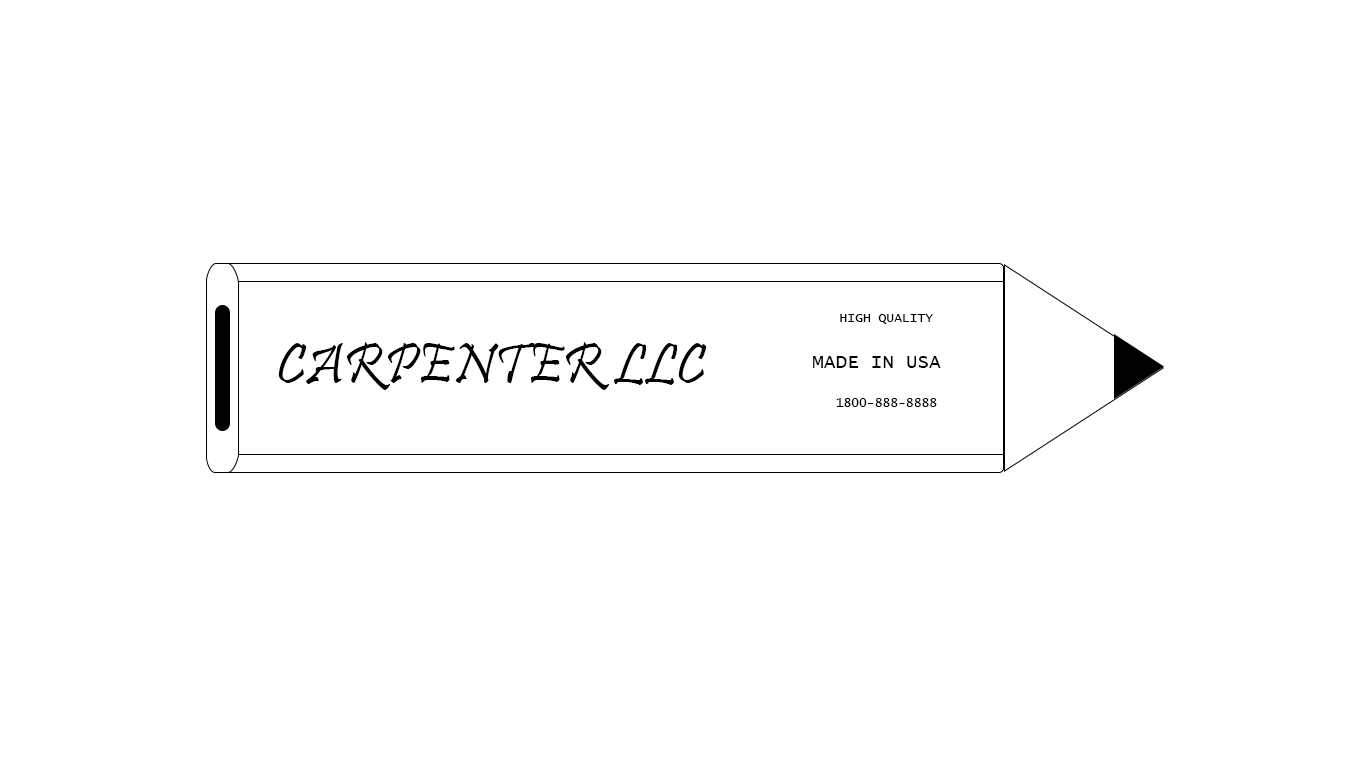
<style>
.page{position:relative;width:1366px;height:768px;background:#ffffff}
.page>*{position:absolute;margin:0}
.t1{font:12.9px "LucidaConsole";color:#000000}
.t2{font:19.4px "LucidaConsole";color:#000000}
.t3{font:58.5px "Pristina-Regular";color:#000000}
</style>
<div class="page">
<p class="t1" style="left:813px;top:314px;width:128px;height:93px;text-align:center">HIGH QUALITY<br><span class="t2"><br>MADE IN USA<br><br></span> 1800-888-8888</p>
<p class="t3" style="left:278px;top:342px;width:429px;height:48px">CARPENTER LLC</p>
</div>
